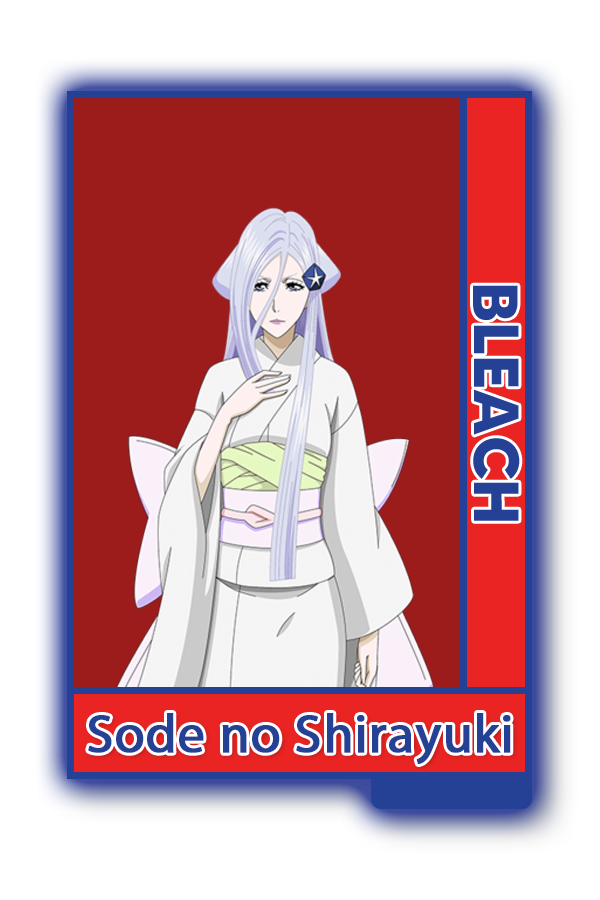
<style>
.page{position:relative;width:600px;height:900px;background:#9c1c1b}
.page>*{position:absolute;margin:0}
.t1{font:63.6px "MADETOMMY-Bold";color:#254195}
.t2{font:54.2px "MyriadPro-Regular";color:#254195;font-weight:bold}
</style>
<div class="page">
<p class="t1" style="left:473px;top:285px;width:47px;height:236px;rotate:90deg">BLEACH</p>
<p class="t2" style="left:88px;top:713px;width:423px;height:51px">Sode no Shirayuki</p>
</div>
